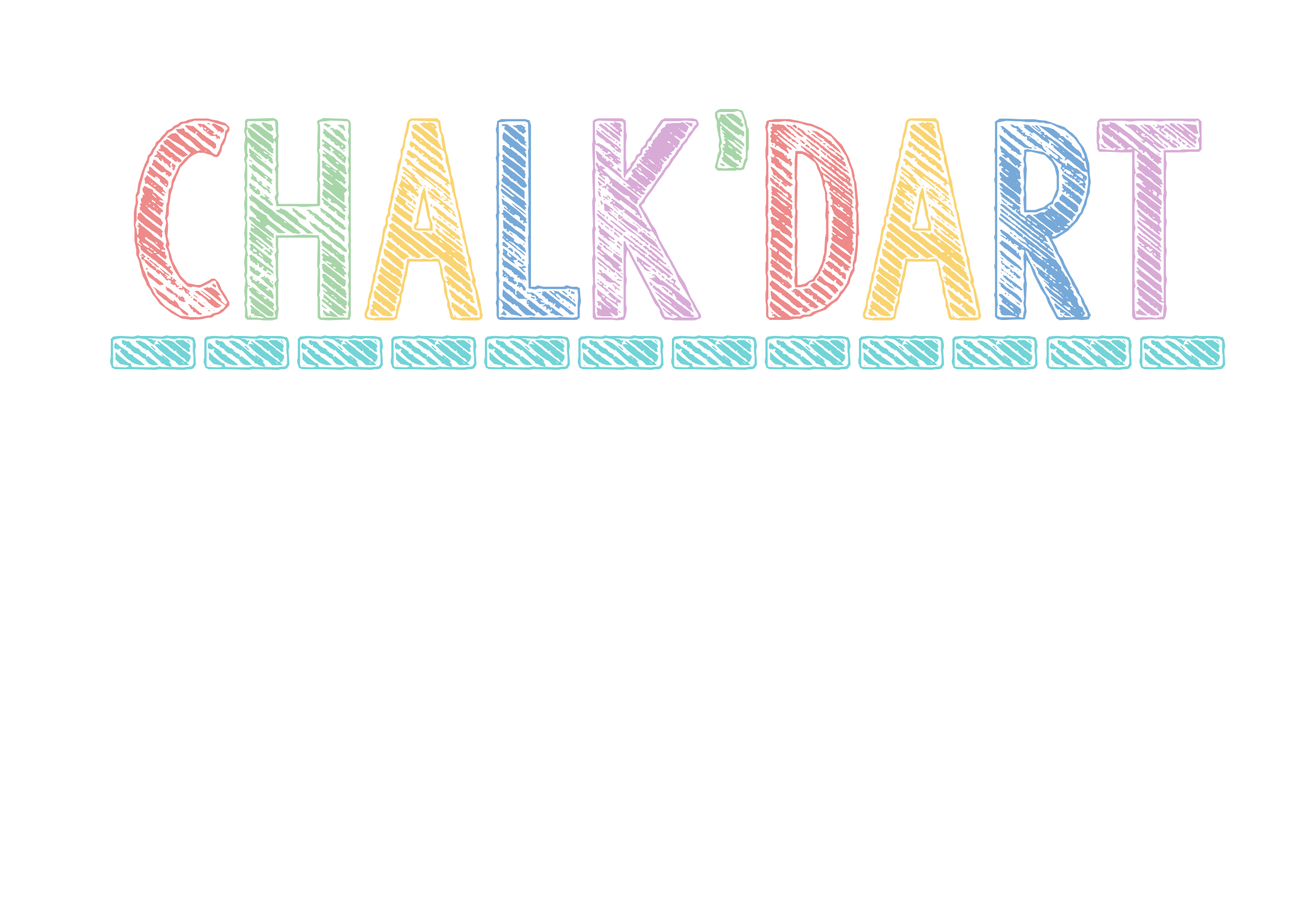
<style>
.page{position:relative;width:1292px;height:923px;background:#ffffff}
.page>*{position:absolute;margin:0}
.t1{font:307.6px "KGTangledUpInYou";color:#ed8a8a}
.t2{font:307.6px "KGTangledUpInYou";color:#a7d5a8}
.t3{font:307.6px "KGTangledUpInYou";color:#f9d472}
.t4{font:307.6px "KGTangledUpInYou";color:#76a9d8}
.t5{font:307.6px "KGTangledUpInYou";color:#d8abd7}
.t6{font:307.6px "KGTangledUpInYou";letter-spacing:-0.025em;color:#72d4d7}
</style>
<div class="page">
<p class="t1" style="left:134px;top:109px;width:1068px;height:212px">C<span class="t2">H</span><span class="t3">A</span><span class="t4">L</span><span class="t5">K</span><span class="t2">’</span>D<span class="t3">A</span><span class="t4">R</span><span class="t5">T</span></p>
<p class="t6" style="left:110px;top:335px;width:1116px;height:35px">____________</p>
</div>
